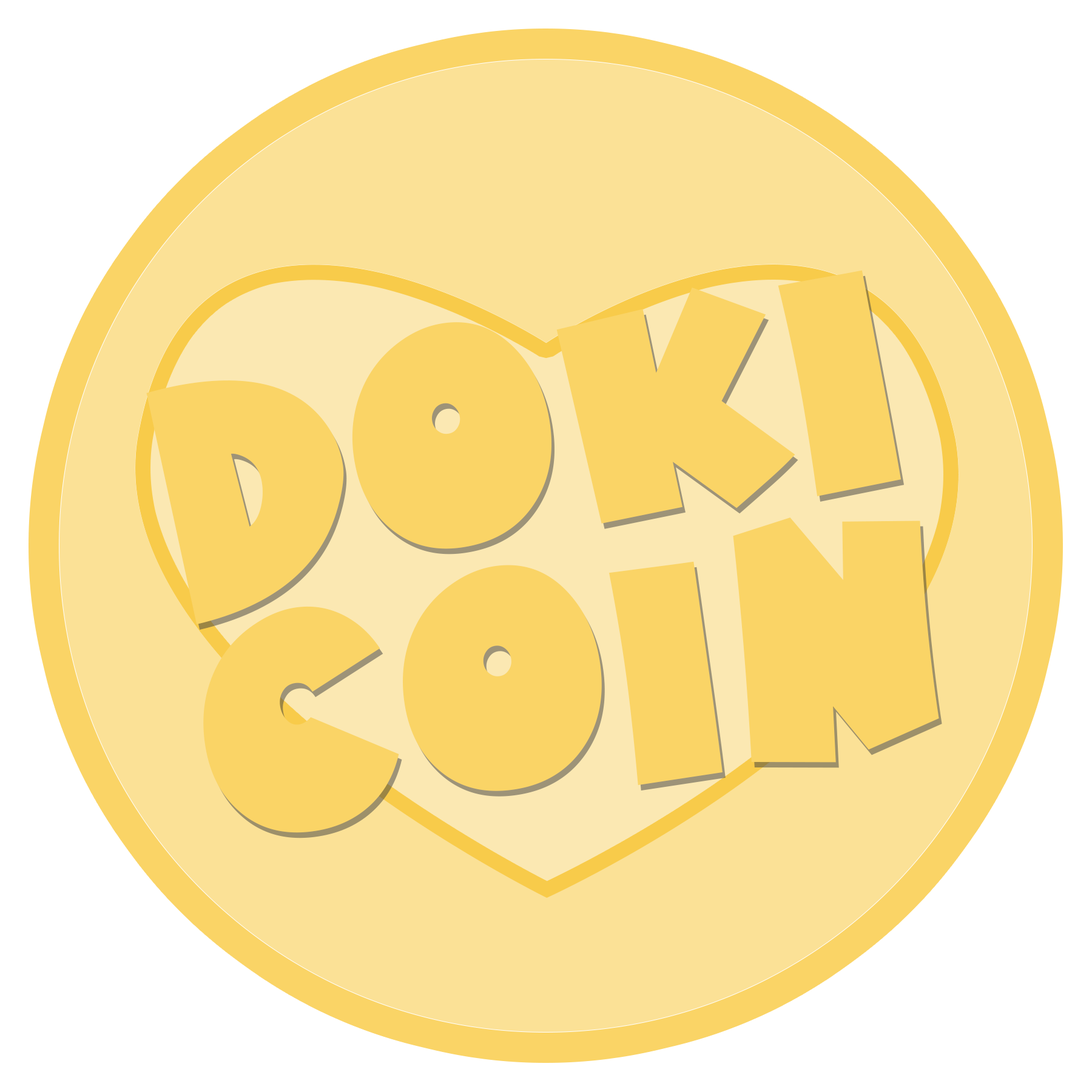
<style>
.page{position:relative;width:1092px;height:1092px;background:#ffffff}
.page>*{position:absolute;margin:0}
.t1{font:303.3px "HotMustardBTN";color:#fad466}
</style>
<div class="page">
<p class="t1" style="left:146px;top:270px;width:755px;height:354px;rotate:-10deg">DOKI</p>
<p class="t1" style="left:203px;top:517px;width:736px;height:316px;rotate:-7deg">COIN</p>
</div>
